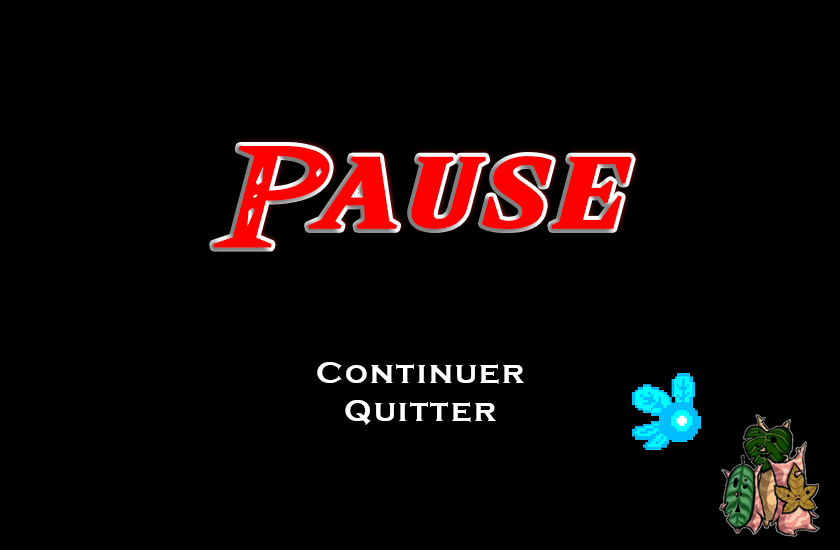
<style>
.page{position:relative;width:840px;height:550px;background:#000000}
.page>*{position:absolute;margin:0}
.t1{font:32px "CopperplateGothic-Bold";letter-spacing:0.075em;color:#ffffff}
</style>
<div class="page">
<p class="t1" style="left:317px;top:362px;width:207px;height:63px;text-align:center">Continuer<br>Quitter</p>
</div>
